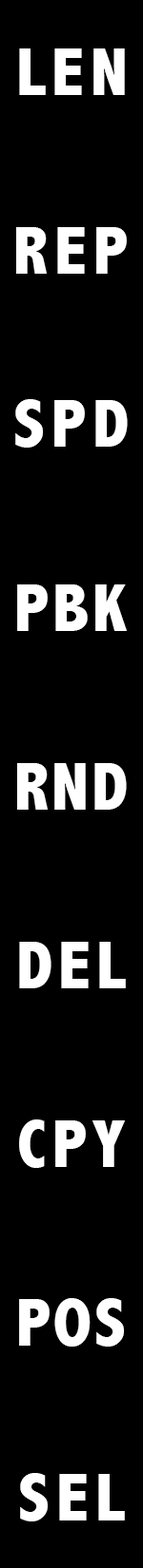
<style>
.page{position:relative;width:143px;height:1568px;background:#000000}
.page>*{position:absolute;margin:0}
.t1{font:68.4px "AbadiMT-CondensedExtraBold";letter-spacing:0.1em;color:#ffffff}
.t2{font:68.4px "AbadiMT-CondensedExtraBold";letter-spacing:0.06em;color:#ffffff}
.t3{font:68.4px "AbadiMT-CondensedExtraBold";letter-spacing:0.04em;color:#ffffff}
.t4{font:68.4px "AbadiMT-CondensedExtraBold";letter-spacing:0.08em;color:#ffffff}
</style>
<div class="page">
<p class="t1" style="left:19px;top:48px;width:105px;height:47px">LEN</p>
<p class="t1" style="left:16px;top:227px;width:110px;height:47px">REP</p>
<p class="t1" style="left:15px;top:399px;width:112px;height:49px">SPD</p>
<p class="t2" style="left:17px;top:584px;width:109px;height:47px">PBK</p>
<p class="t3" style="left:17px;top:763px;width:109px;height:47px">RND</p>
<p class="t4" style="left:19px;top:942px;width:106px;height:46px">DEL</p>
<p class="t4" style="left:19px;top:1119px;width:105px;height:49px">CPY</p>
<p class="t3" style="left:19px;top:1298px;width:105px;height:49px">POS</p>
<p class="t1" style="left:20px;top:1473px;width:104px;height:48px">SEL</p>
</div>
